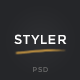
<style>
.page{position:relative;width:80px;height:80px;background:#252629}
.page>*{position:absolute;margin:0}
.t1{font:13px "Montserrat-Regular";letter-spacing:0.05em;color:#ffffff;text-transform:uppercase}
.t2{font:7px "Montserrat-Regular";letter-spacing:0.1em;color:#676767;text-transform:uppercase}
</style>
<div class="page">
<p class="t1" style="left:14px;top:34px;width:53px;height:10px">styler</p>
<p class="t2" style="left:33px;top:67px;width:15px;height:5px">psd</p>
</div>
